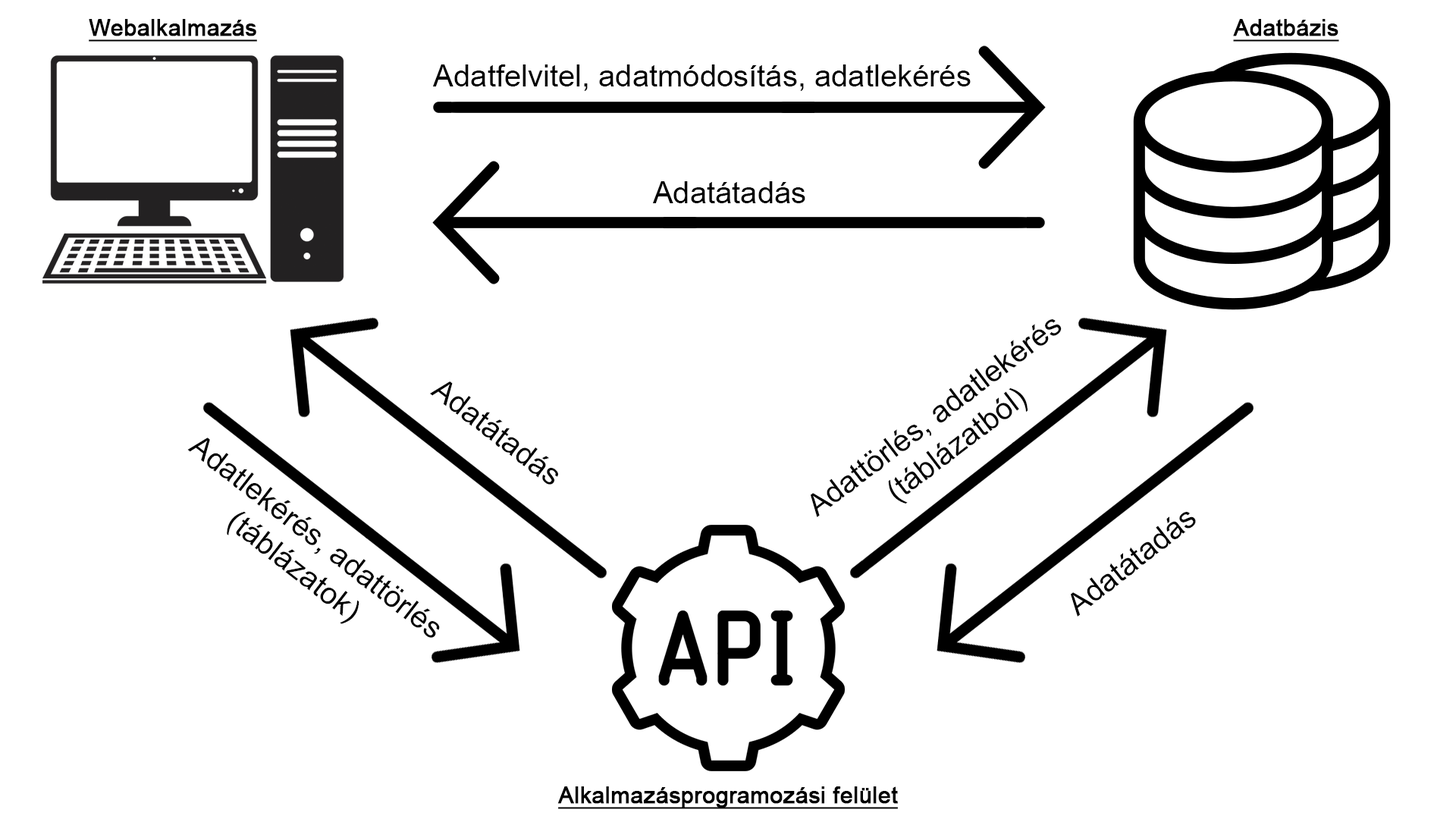
<style>
.page{position:relative;width:1456px;height:819px;background:#ffffff}
.page>*{position:absolute;margin:0}
.t1{font:22.7px "ArialMT";color:#000000;font-weight:bold;text-decoration:underline}
.t2{font:30.3px "ArialMT";color:#000000}
</style>
<div class="page">
<p class="t1" style="left:89px;top:19px;width:168px;height:23px">Webalkalmazás</p>
<p class="t1" style="left:1233px;top:19px;width:106px;height:23px">Adatbázis</p>
<p class="t2" style="left:433px;top:64px;width:538px;height:27px">Adatfelvitel, adatmódosítás, adatlekérés</p>
<p class="t2" style="left:653px;top:181px;width:152px;height:22px">Adatátadás</p>
<p class="t2" style="left:810px;top:319px;width:252px;height:198px;text-align:center;rotate:-37deg">Adattörlés, adatlekérés<br>(táblázatból)</p>
<p class="t2" style="left:430px;top:381px;width:128px;height:104px;rotate:38deg">Adatátadás</p>
<p class="t2" style="left:187px;top:438px;width:253px;height:200px;text-align:center;rotate:38deg">Adatlekérés, adattörlés<br>(táblázatok)</p>
<p class="t2" style="left:1071px;top:512px;width:125px;height:105px;rotate:-38deg">Adatátadás</p>
<p class="t1" style="left:557px;top:786px;width:341px;height:23px">Alkalmazásprogramozási felület</p>
</div>
